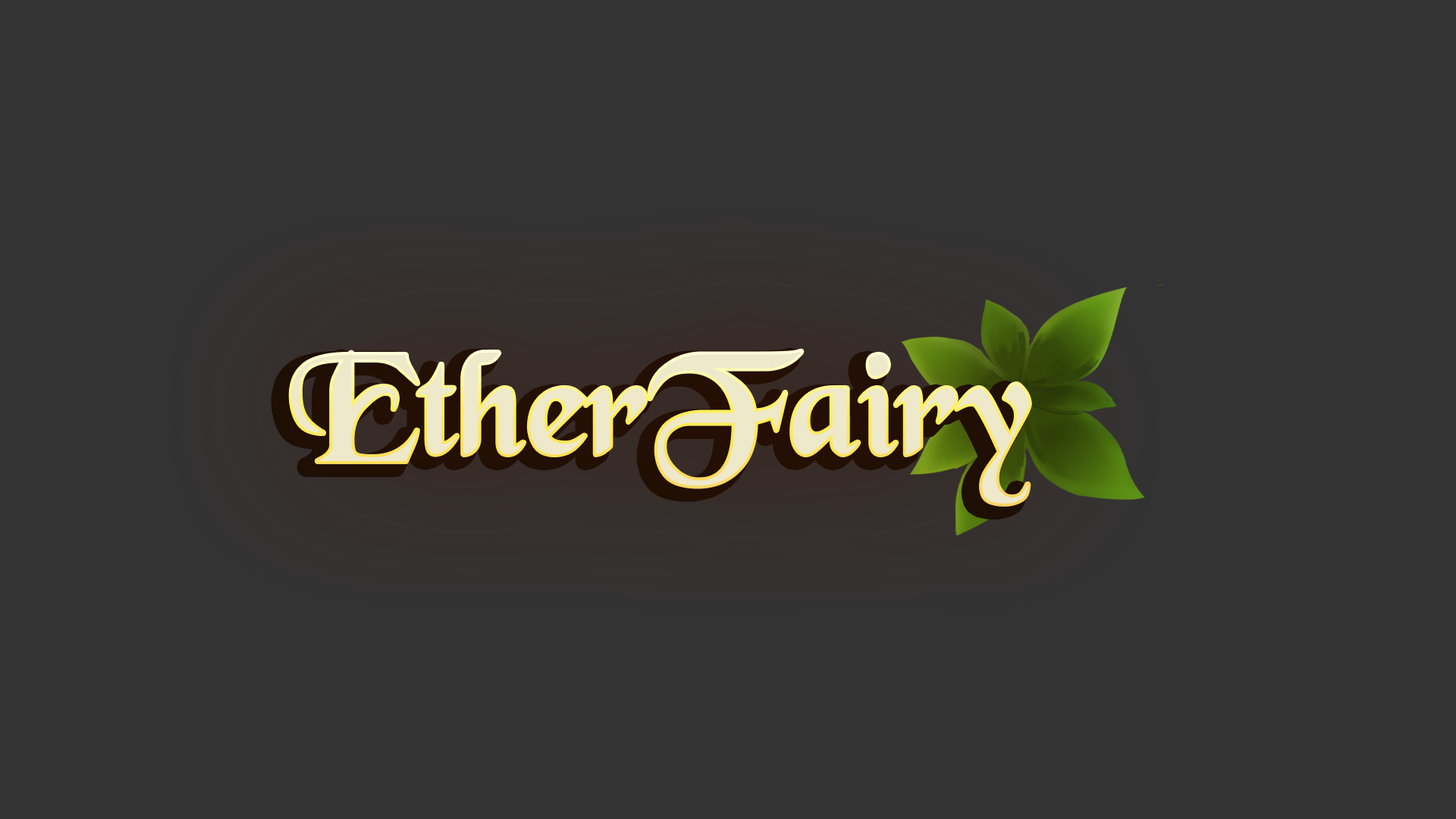
<style>
.page{position:relative;width:1456px;height:819px;background:#333333}
.page>*{position:absolute;margin:0}
.t1{font:151.7px "BlackChancery";color:#ede9ca}
</style>
<div class="page">
<p class="t1" style="left:291px;top:351px;width:738px;height:153px">EtherFairy</p>
</div>
